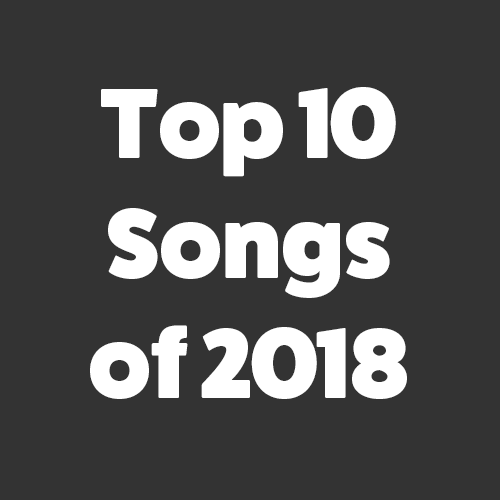
<style>
.page{position:relative;width:500px;height:500px;background:#333333}
.page>*{position:absolute;margin:0}
.t1{font:100px "FatFrank-Heavy";color:#ffffff}
</style>
<div class="page">
<p class="t1" style="left:90px;top:87px;width:317px;height:312px;text-align:center">Top 10<br> Songs <br>of 2018</p>
</div>
